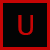
<style>
.page{position:relative;width:50px;height:50px;background:#040404}
.page>*{position:absolute;margin:0}
.t1{font:27.6px "LucidaGrande";color:#c70505}
</style>
<div class="page">
<p class="t1" style="left:18px;top:15px;width:15px;height:20px">U</p>
</div>
